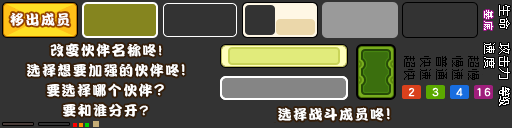
<style>
.page{position:relative;width:512px;height:128px;background:#333333}
.page>*{position:absolute;margin:0}
.t1{font:11.9px "ZpixEX2";letter-spacing:0.1em;color:#ffffff}
.t2{font:14px "DFPKanTingLiuW9";letter-spacing:0.1em;color:#ffffff}
.t3{font:10px "ZpixEX2";letter-spacing:0.1em;color:#ffffff}
.t4{font:11.9px "ZpixEX2";letter-spacing:0.05em;color:#ffffff}
.t5{font:16px "DFPKanTingLiuW9";letter-spacing:0.1em;color:#ffffff}
.t6{font:12px "ZpixEX2";letter-spacing:0.1em;color:#000000}
.t7{font:11.9px "ZpixEX2";letter-spacing:-0.1em;color:#ffffff;scale:0.8 1}
</style>
<div class="page">
<p class="t1" style="left:499px;top:5px;width:11px;height:24px;rotate:90deg">生命</p>
<p class="t2" style="left:10px;top:13px;width:60px;height:13px">移出成员</p>
<p class="t3" style="left:484px;top:10px;width:9px;height:20px;rotate:90deg">基底</p>
<p class="t2" style="left:50px;top:43px;width:112px;height:14px">改变伙伴名称咚!</p>
<p class="t1" style="left:484px;top:43px;width:11px;height:25px;rotate:90deg">速度</p>
<p class="t4" style="left:499px;top:43px;width:11px;height:36px;rotate:90deg">攻击力</p>
<p class="t2" style="left:27px;top:63px;width:158px;height:14px">选择想要加强的伙伴咚<span class="t5">!</span></p>
<p class="t6" style="left:404px;top:56px;width:11px;height:24px;rotate:90deg">超快</p>
<p class="t6" style="left:420px;top:56px;width:11px;height:24px;rotate:90deg">快速</p>
<p class="t6" style="left:436px;top:56px;width:11px;height:24px;rotate:90deg">普通</p>
<p class="t6" style="left:452px;top:56px;width:11px;height:24px;rotate:90deg">慢速</p>
<p class="t6" style="left:468px;top:56px;width:11px;height:24px;rotate:90deg">超慢</p>
<p class="t2" style="left:47px;top:83px;width:117px;height:14px">要选择哪个伙伴<span class="t5">?</span></p>
<p class="t7" style="left:499px;top:87px;width:11px;height:19px;rotate:90deg">等级</p>
<p class="t2" style="left:63px;top:103px;width:85px;height:14px">要和谁分开?</p>
<p class="t2" style="left:278px;top:107px;width:112px;height:14px">选择战斗成员咚<span class="t5">!</span></p>
</div>
